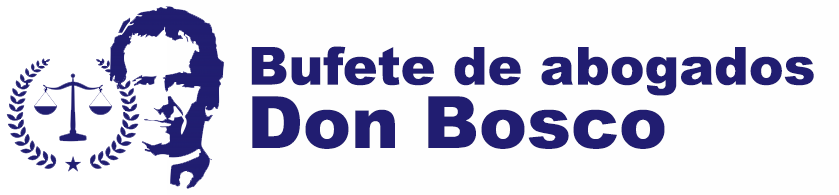
<style>
.page{position:relative;width:839px;height:195px;background:#fefefe}
.page>*{position:absolute;margin:0}
.t1{font:52.1px "Arial-Black";color:#211d71}
.t2{font:72px "Arial-Black";color:#211d71}
</style>
<div class="page">
<p class="t1" style="left:251px;top:46px;width:563px;height:50px">Bufete de abogados</p>
<p class="t2" style="left:252px;top:96px;width:413px;height:53px">Don Bosco</p>
</div>
